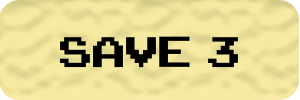
<style>
.page{position:relative;width:300px;height:100px}
.page>*{position:absolute;margin:0}
.t1{font:60px "ArcadeClassic";color:#000000}
</style>
<div class="page">
<p class="t1" style="left:60px;top:36px;width:178px;height:32px">save  3</p>
</div>
